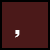
<style>
.page{position:relative;width:50px;height:50px;background:#4b1919}
.page>*{position:absolute;margin:0}
.t1{font:24px "H2gtrE";color:#ffffff}
</style>
<div class="page">
<p class="t1" style="left:15px;top:30px;width:5px;height:8px">,</p>
</div>
